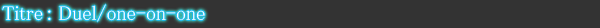
<style>
.page{position:relative;width:600px;height:28px;background:#333333}
.page>*{position:absolute;margin:0}
.t1{font:20px "MS-PMincho";color:#ffffff}
</style>
<div class="page">
<p class="t1" style="left:2px;top:4px;width:203px;height:18px">Titre : Duel/one-on-one</p>
</div>
